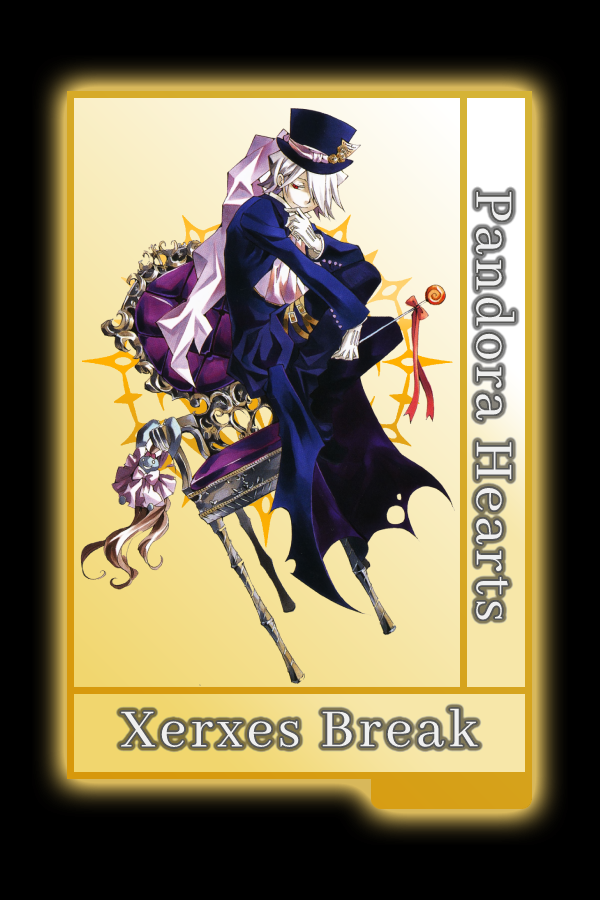
<style>
.page{position:relative;width:600px;height:900px;background:#000000}
.page>*{position:absolute;margin:0}
.t1{font:59.1px "AbhayaLibre-Regular";letter-spacing:0.072em;color:#efefef}
.t2{font:59px "AbhayaLibre-Regular";letter-spacing:0.072em;color:#efefef}
</style>
<div class="page">
<p class="t1" style="left:476px;top:192px;width:39px;height:428px;rotate:90deg">Pandora Hearts</p>
<p class="t2" style="left:120px;top:708px;width:358px;height:39px">Xerxes Break</p>
</div>
